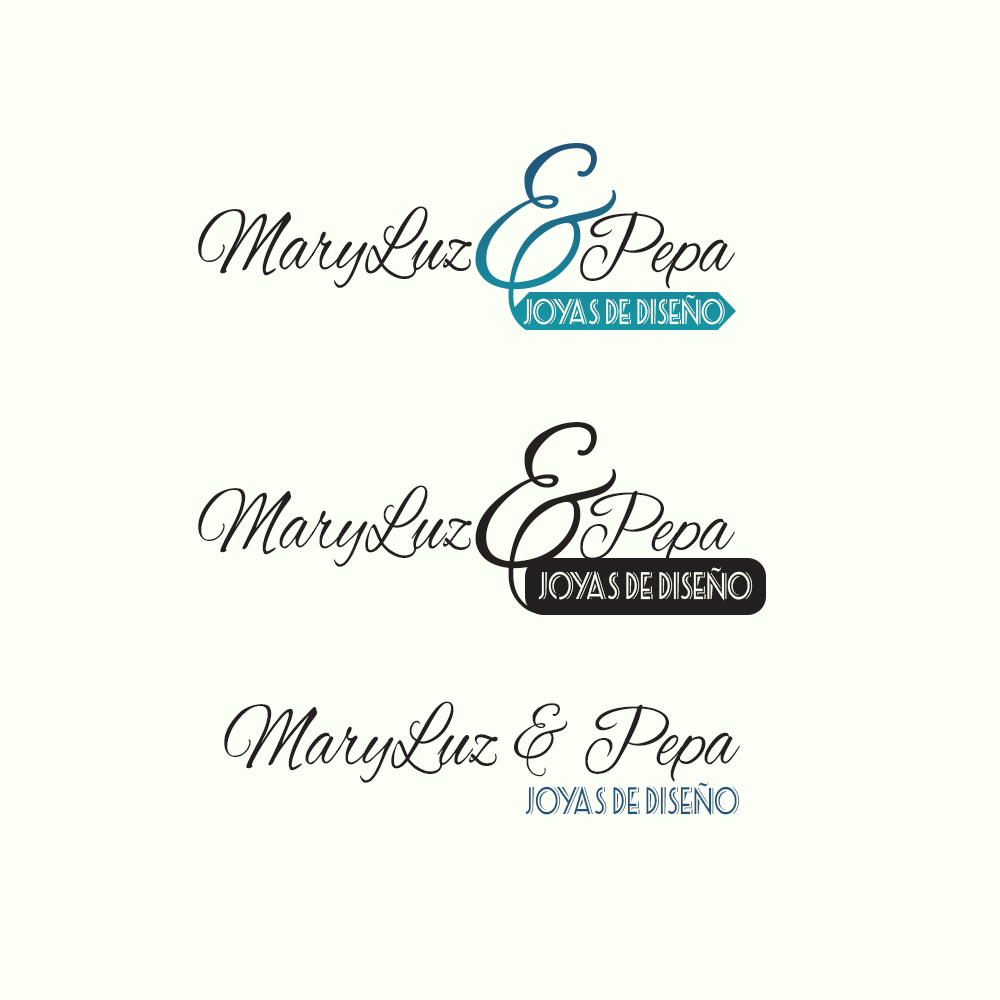
<style>
.page{position:relative;width:1000px;height:1000px;background:#fcfff5}
.page>*{position:absolute;margin:0}
.t1{font:92px "AlexBrush-Regular";color:#242020;scale:0.79 1}
.t2{font:28.8px "SeasideResortNF";color:#fcfff5;scale:0.8 1}
.t3{font:242.3px "AlexBrush-Regular";color:#242020;scale:0.79 1}
.t4{font:31px "SeasideResortNF";color:#fcfff5;scale:0.79 1}
.t5{font:31px "SeasideResortNF";color:#225378;scale:0.79 1}
</style>
<div class="page">
<p class="t1" style="left:198px;top:206px;width:274px;height:82px">MaryLuz</p>
<p class="t1" style="left:580px;top:211px;width:155px;height:78px">Pepa</p>
<p class="t2" style="left:523px;top:295px;width:202px;height:31px">Joyas De Diseño</p>
<p class="t3" style="left:475px;top:422px;width:142px;height:193px">&amp;</p>
<p class="t1" style="left:198px;top:485px;width:274px;height:82px">MaryLuz</p>
<p class="t1" style="left:580px;top:490px;width:155px;height:78px">Pepa</p>
<p class="t4" style="left:538px;top:567px;width:215px;height:34px">Joyas De Diseño</p>
<p class="t1" style="left:224px;top:701px;width:516px;height:82px">MaryLuz &amp; Pepa</p>
<p class="t5" style="left:525px;top:782px;width:215px;height:34px">Joyas De Diseño</p>
</div>
